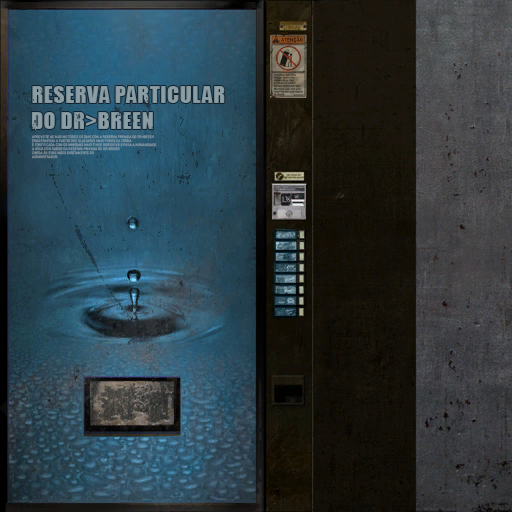
<style>
.page{position:relative;width:512px;height:512px}
.page>*{position:absolute;margin:0}
.t1{font:5.1px "Bahnschrift";text-transform:uppercase}
.t2{font:22px "Impact";letter-spacing:0.02em;color:#8c9ea5}
.t3{font:3.5px/4px "Bahnschrift";color:#788b98;text-transform:uppercase;scale:0.95 1}
</style>
<div class="page">
<p class="t1" style="left:281px;top:37px;width:22px;height:6px">atenção</p>
<p class="t2" style="left:32px;top:86px;width:193px;height:17px">RESERVA PARTICULAR</p>
<p class="t2" style="left:31px;top:112px;width:122px;height:17px">DO DR&gt;BREEN</p>
<p class="t3" style="left:31px;top:134px;width:126px;height:25px;text-align:right">Aproveite ao máximo todos os dias com a Reserva Privada do Dr&gt;Breen <br>Engarrafada a partir dos glaciares mais puros da Terra <br>e fortificada com os minerais mais finos disponíveis para a humanidade, <br>a água com sabor da Reserva Privada do Dr&gt;Breen <br>chega às suas mãos diretamente do<br>Administrador.</p>
</div>
